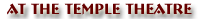
<style>
.page{position:relative;width:200px;height:19px;background:#ffffff}
.page>*{position:absolute;margin:0}
.t1{font:15px "BremenBT-Bold";color:#660000}
</style>
<div class="page">
<p class="t1" style="left:7px;top:3px;width:185px;height:12px">at the Temple Theatre</p>
</div>
